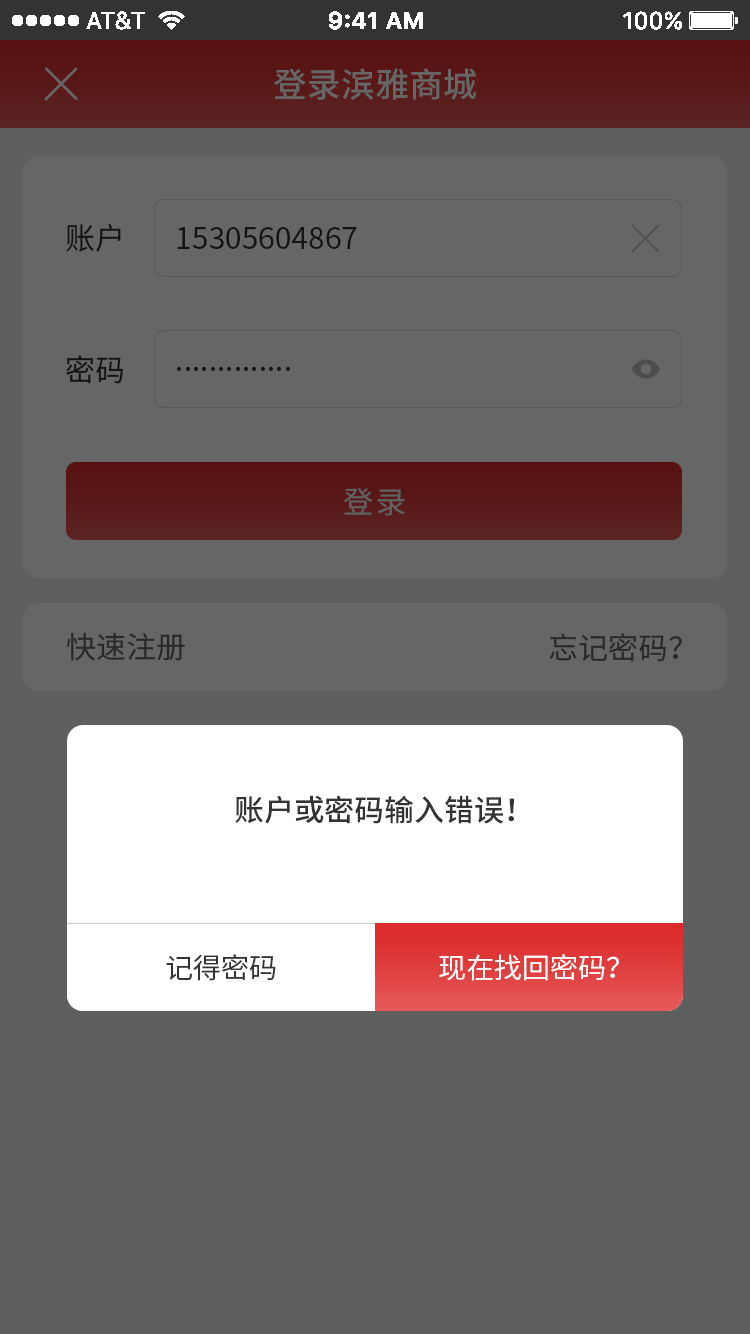
<style>
.page{position:relative;width:750px;height:1334px;background:#5f5f5f}
.page>*{position:absolute;margin:0}
.t1{font:34px "SourceHanSansCN-Medium";color:#666666}
.t2{font:30px "SourceHanSansCN-Regular";color:#141414}
.t3{font:30px "SourceHanSansCN-Regular";letter-spacing:0.1em;color:#616161}
.t4{font:30px "SourceHanSansCN-Regular";color:#292929}
.t5{font:30px "SourceHanSansCN-Medium";color:#333333}
.t6{font:28px "SourceHanSansCN-Regular";color:#333333}
.t7{font:28px "SourceHanSansCN-Regular";color:#ffffff}
</style>
<div class="page">
<p class="t1" style="left:274px;top:68px;width:202px;height:32px">登录滨雅商城</p>
<p class="t2" style="left:66px;top:223px;width:55px;height:29px">账户</p>
<p class="t2" style="left:177px;top:227px;width:180px;height:22px">15305604867</p>
<p class="t2" style="left:66px;top:355px;width:57px;height:29px">密码</p>
<p class="t2" style="left:177px;top:366px;width:113px;height:5px">..............</p>
<p class="t3" style="left:343px;top:488px;width:62px;height:28px">登录</p>
<p class="t4" style="left:66px;top:632px;width:119px;height:29px">快速注册</p>
<p class="t4" style="left:549px;top:633px;width:133px;height:29px">忘记密码？</p>
<p class="t5" style="left:235px;top:795px;width:279px;height:29px">账户或密码输入错误！</p>
<p class="t6" style="left:166px;top:954px;width:110px;height:27px">记得密码</p>
<p class="t7" style="left:439px;top:954px;width:180px;height:27px">现在找回密码？</p>
</div>
